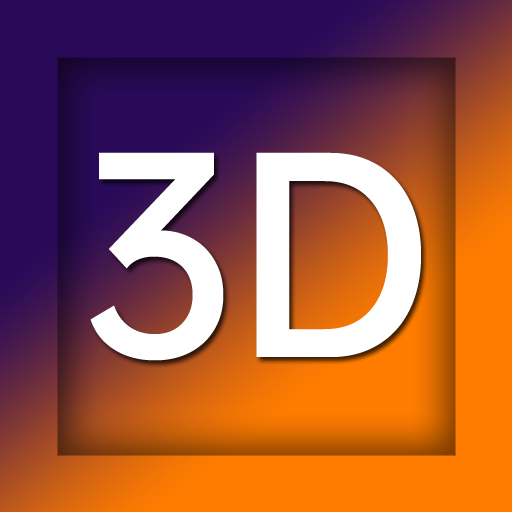
<style>
.page{position:relative;width:512px;height:512px}
.page>*{position:absolute;margin:0}
.t1{font:250px "OPPOSans-B";color:#ffffff}
</style>
<div class="page">
<p class="t1" style="left:90px;top:152px;width:331px;height:209px">3D</p>
</div>
